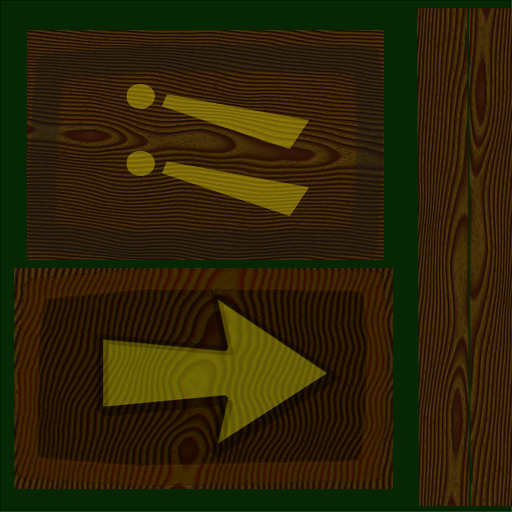
<style>
.page{position:relative;width:512px;height:512px}
.page>*{position:absolute;margin:0}
.t1{font:187.6px "Grinched";letter-spacing:0.1em;color:#7f6a08;scale:0.83 1}
</style>
<div class="page">
<p class="t1" style="left:126px;top:83px;width:183px;height:133px;rotate:90deg">!!</p>
</div>
